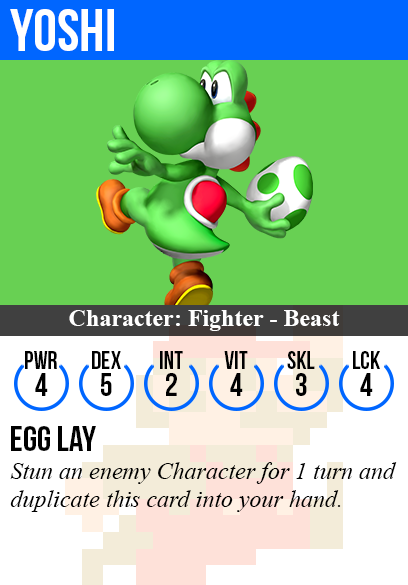
<style>
.page{position:relative;width:408px;height:585px;background:#68d053}
.page>*{position:absolute;margin:0}
.t1{font:60px "BebasNeue";color:#ffffff}
.t2{font:24px "TimesNewRomanPS-BoldMT";color:#ffffff}
.t3{font:25px "BebasNeue";color:#000000}
.t4{font:32px "BebasNeue";color:#000000}
.t5{font:36px "BebasNeue";color:#000000}
.t6{font:24px "TimesNewRomanPS-ItalicMT";color:#000000}
</style>
<div class="page">
<p class="t1" style="left:10px;top:9px;width:104px;height:42px">yoshi</p>
<p class="t2" style="left:69px;top:310px;width:271px;height:21px">Character: Fighter - Beast</p>
<p class="t3" style="left:25px;top:351px;width:32px;height:18px">PWR</p>
<p class="t3" style="left:92px;top:351px;width:29px;height:18px">dex</p>
<p class="t3" style="left:160px;top:351px;width:23px;height:18px">int</p>
<p class="t3" style="left:224px;top:351px;width:24px;height:18px">vit</p>
<p class="t3" style="left:287px;top:351px;width:28px;height:18px">skl</p>
<p class="t3" style="left:353px;top:351px;width:27px;height:18px">lck</p>
<p class="t4" style="left:35px;top:373px;width:13px;height:23px">4</p>
<p class="t4" style="left:101px;top:373px;width:11px;height:23px">5</p>
<p class="t4" style="left:166px;top:373px;width:11px;height:23px">2</p>
<p class="t4" style="left:230px;top:373px;width:13px;height:23px">4</p>
<p class="t4" style="left:296px;top:373px;width:11px;height:23px">3</p>
<p class="t4" style="left:360px;top:373px;width:13px;height:23px">4</p>
<p class="t5" style="left:11px;top:426px;width:85px;height:25px">egg lay</p>
<p class="t6" style="left:10px;top:462px;width:387px;height:50px">Stun an enemy Character for 1 turn and<br>duplicate this card into your hand.</p>
</div>
